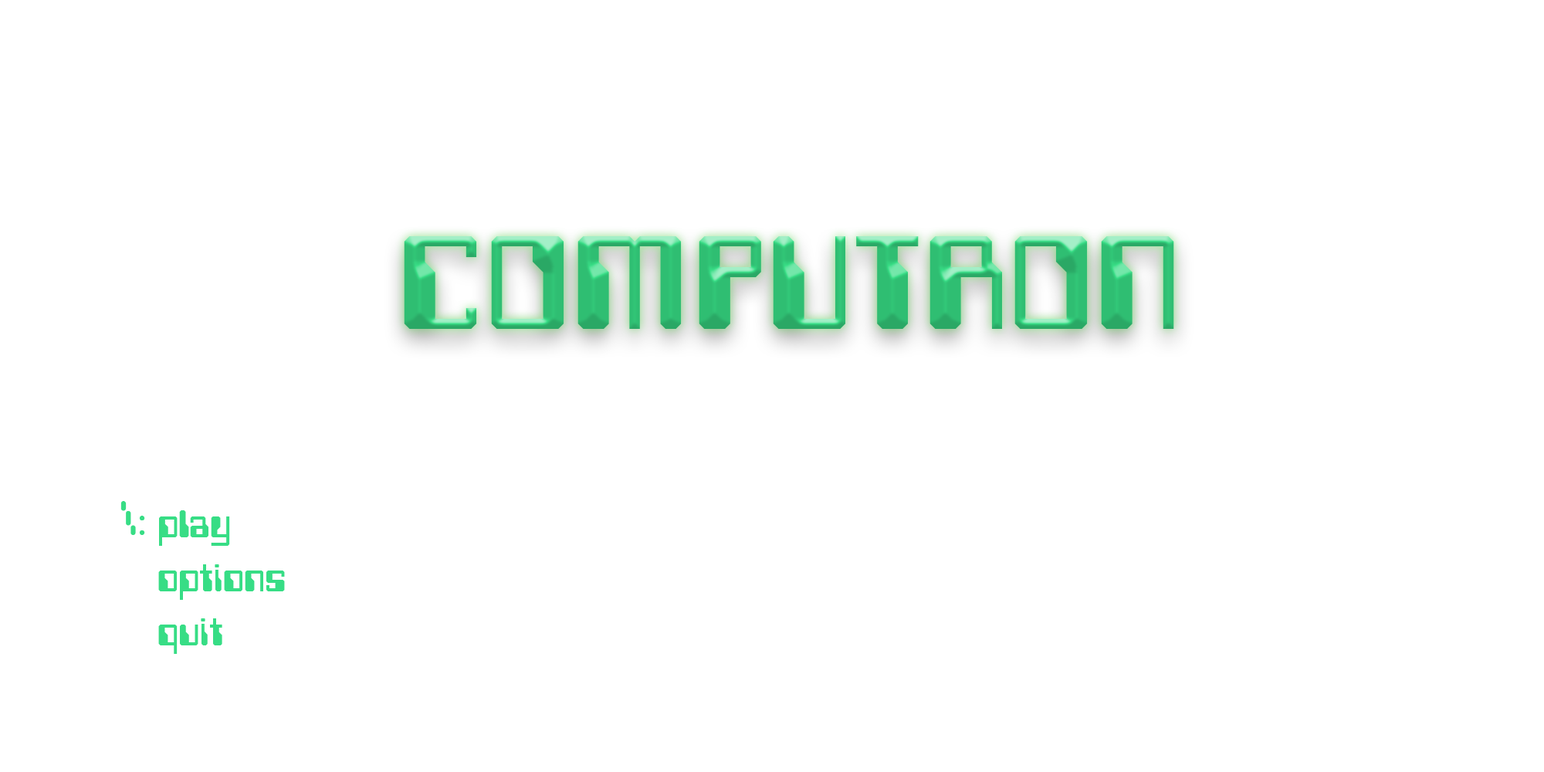
<style>
.page{position:relative;width:1544px;height:772px;background:#ffffff}
.page>*{position:absolute;margin:0}
.t1{font:154.4px "Computerfont";color:#2fbe72}
.t2{font:77.2px "CyberSystem2-3";color:#37dd85}
.t3{font:45px "Computerfont";color:#37dd85}
</style>
<div class="page">
<p class="t1" style="left:404px;top:236px;width:770px;height:93px">COMPUTRON</p>
<p class="t2" style="left:120px;top:501px;width:25px;height:34px">\:</p>
<p class="t3" style="left:158px;top:510px;width:127px;height:144px">play<br>options<br>quit</p>
</div>
